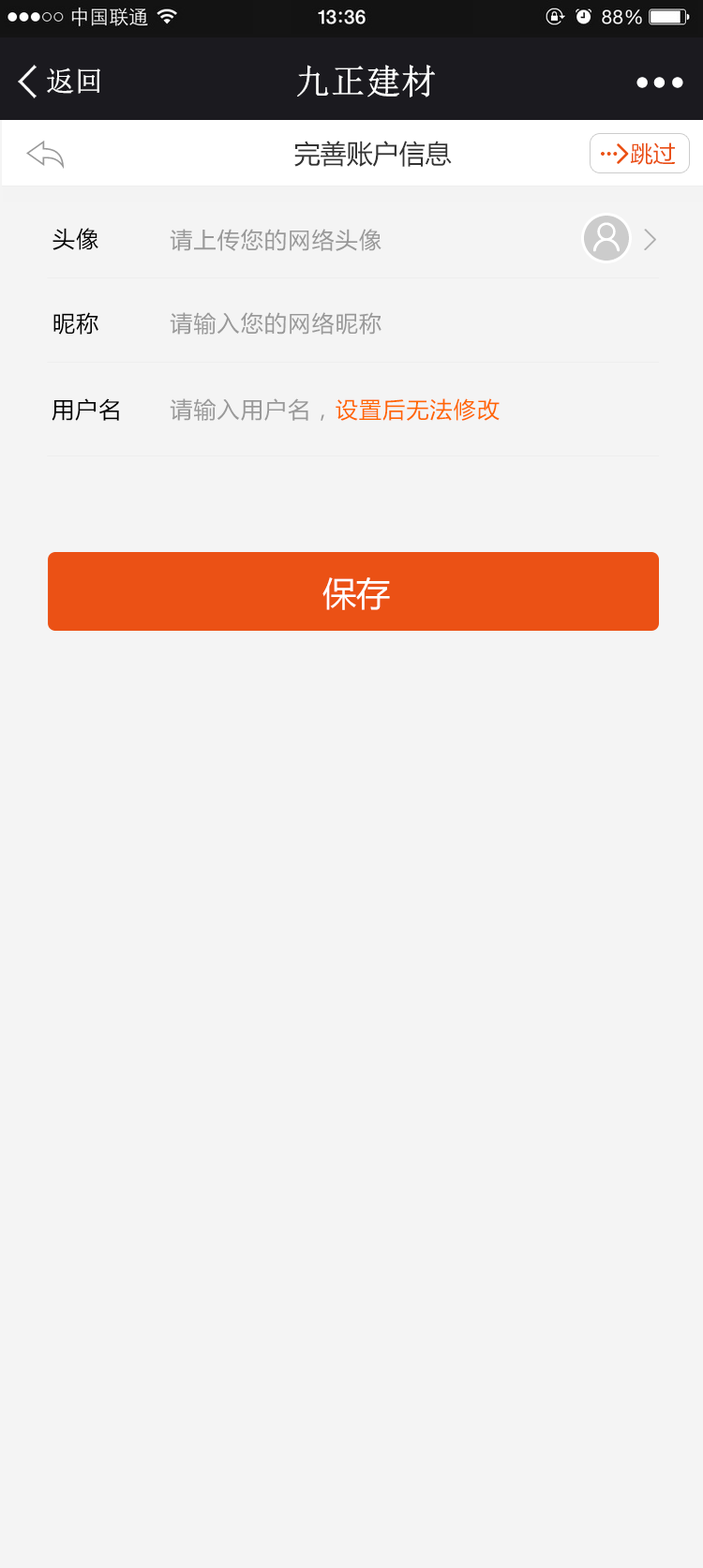
<style>
.page{position:relative;width:703px;height:1568px;background:#f4f4f4}
.page>*{position:absolute;margin:0}
.t1{font:34.4px "NSimSun";color:#ffffff;font-weight:bold}
.t2{font:28.1px "NSimSun";color:#ffffff;font-weight:bold}
.t3{font:26.2px "MicrosoftYaHei";color:#333333}
.t4{font:26.2px "MicrosoftYaHei";color:#333333;font-weight:bold}
.t5{font:22.5px "MicrosoftYaHei";color:#ea5114}
.t6{font:26.2px "MicrosoftYaHei";color:#999999;font-weight:bold}
.t7{font:22.5px "MicrosoftYaHei";letter-spacing:0.05em;color:#000000}
.t8{font:22.5px "MicrosoftYaHei";letter-spacing:0.05em;color:#999999}
.t9{font:22.5px "MicrosoftYaHei";letter-spacing:0.05em;color:#ff6600}
.t10{font:33.7px "MicrosoftYaHei";color:#ffffff}
</style>
<div class="page">
<p class="t1" style="left:297px;top:65px;width:138px;height:32px">九正建材</p>
<p class="t2" style="left:47px;top:67px;width:53px;height:27px">返回</p>
<p class="t3" style="left:294px;top:141px;width:158px;height:26px"><span class="t4"><br></span>完善账户信息</p>
<p class="t5" style="left:630px;top:142px;width:46px;height:23px"><span class="t6"><br></span>跳过</p>
<p class="t7" style="left:52px;top:228px;width:46px;height:22px">头像</p>
<p class="t8" style="left:170px;top:229px;width:211px;height:22px">请上传您的网络头像</p>
<p class="t7" style="left:53px;top:312px;width:45px;height:23px">昵称</p>
<p class="t8" style="left:170px;top:312px;width:211px;height:23px">请输入您的网络昵称</p>
<p class="t7" style="left:52px;top:398px;width:67px;height:23px">用户名</p>
<p class="t8" style="left:170px;top:398px;width:330px;height:23px">请输入用户名，<span class="t9">设置后无法修改</span></p>
<p class="t10" style="left:322px;top:577px;width:68px;height:33px">保存</p>
</div>
